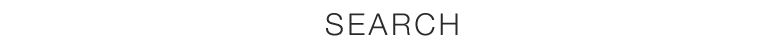
<style>
.page{position:relative;width:784px;height:47px;background:#ffffff}
.page>*{position:absolute;margin:0}
.t1{font:30px "HelveticaNeue-Light";letter-spacing:0.11em;color:#2a2a2a}
</style>
<div class="page">
<p class="t1" style="left:326px;top:13px;width:132px;height:23px">SEARCH</p>
</div>
